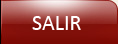
<style>
.page{position:relative;width:118px;height:44px}
.page>*{position:absolute;margin:0}
.t1{font:22px "Calibri";color:#ffffff}
</style>
<div class="page">
<p class="t1" style="left:32px;top:16px;width:49px;height:14px">SALIR</p>
</div>
